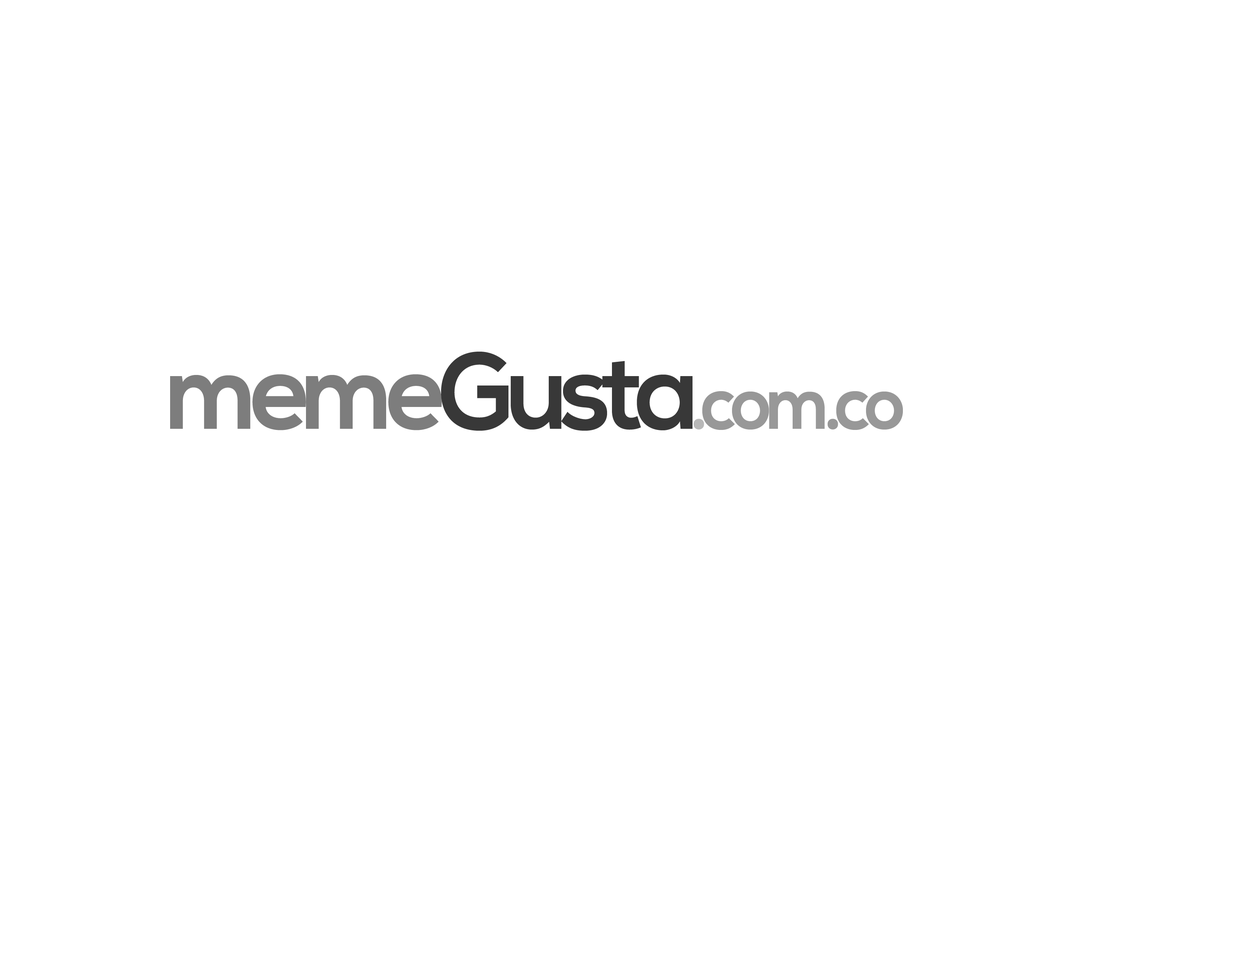
<style>
.page{position:relative;width:1242px;height:960px;background:#ffffff}
.page>*{position:absolute;margin:0}
.t1{font:74.1px "NexaBold";letter-spacing:-0.08em;color:#989898;scale:0.97 1}
.t2{font:107.1px "NexaBold";letter-spacing:-0.08em;color:#7d7d7d;scale:0.97 1}
.t3{font:107.1px "NexaBold";letter-spacing:-0.08em;color:#383838;scale:0.97 1}
.t4{font:74.1px "NexaBold";letter-spacing:-0.08em;color:#b8b8b8;scale:0.97 1}
</style>
<div class="page">
<p class="t1" style="left:170px;top:352px;width:733px;height:79px"><span class="t2">meme</span><span class="t3">Gusta</span><span class="t4">.</span>com.co</p>
</div>
